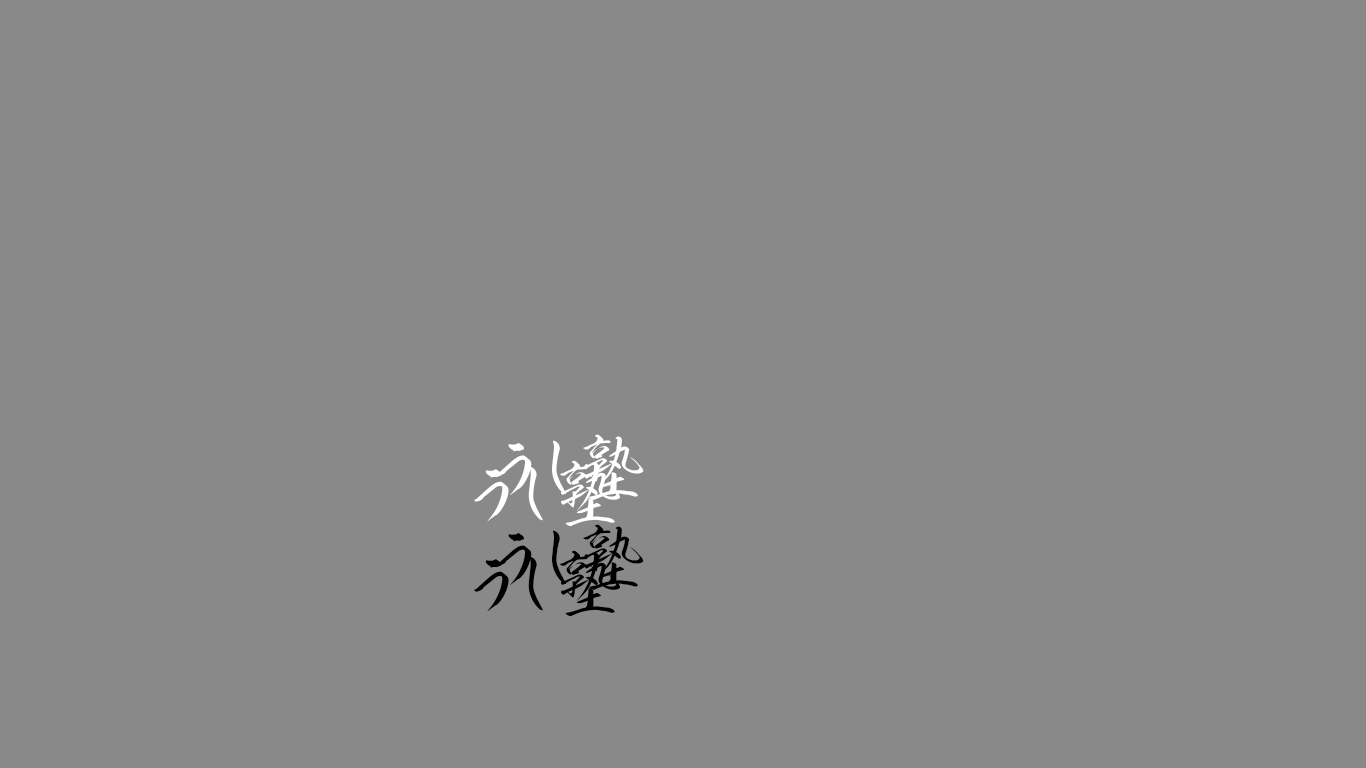
<style>
.page{position:relative;width:1366px;height:768px;background:#898989}
.page>*{position:absolute;margin:0}
.t1{font:72px "KsoShinryuSou";color:#ffffff}
.t2{font:72px "KsoShinryuSou";color:#000000}
</style>
<div class="page">
<p class="t1" style="left:497px;top:434px;width:147px;height:66px">うし塾</p>
<p class="t2" style="left:497px;top:524px;width:147px;height:66px">うし塾</p>
</div>
